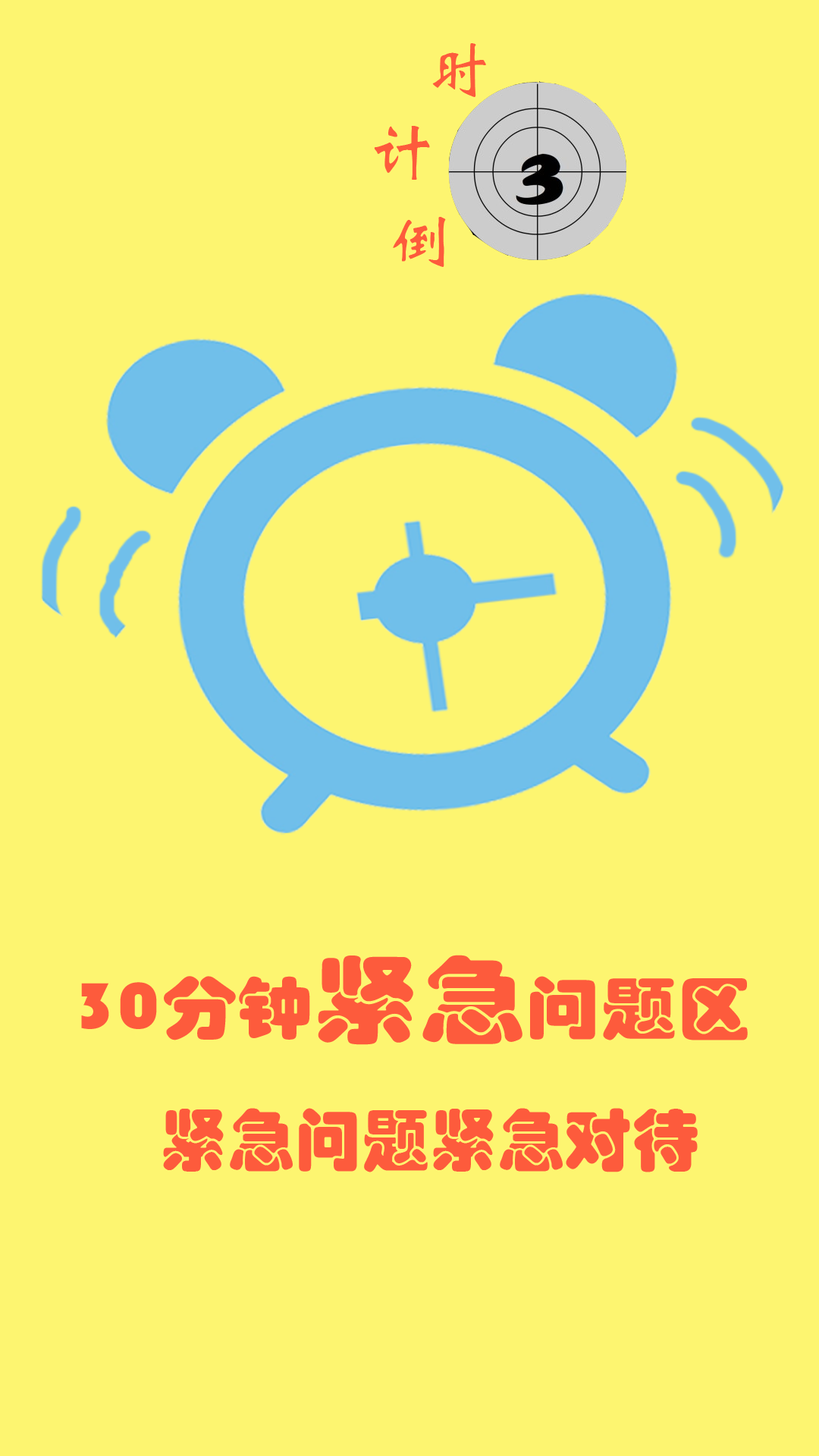
<style>
.page{position:relative;width:819px;height:1456px;background:#fdf570}
.page>*{position:absolute;margin:0}
.t1{font:67.4px "STXinwei";color:#fd5b3c}
.t2{font:67.4px "STHupo";color:#fd5b3c;scale:1.12 1}
.t3{font:94.8px "STHupo";color:#fd5b3c;scale:1.12 1}
.t4{font:67.4px "STHupo";color:#fd5b3c}
</style>
<div class="page">
<p class="t1" style="left:432px;top:43px;width:54px;height:54px">时</p>
<p class="t1" style="left:374px;top:126px;width:56px;height:54px">计</p>
<p class="t1" style="left:393px;top:217px;width:53px;height:50px">倒</p>
<p class="t2" style="left:81px;top:955px;width:667px;height:90px">30分钟<span class="t3">紧急</span>问题区</p>
<p class="t4" style="left:163px;top:1108px;width:535px;height:64px">紧急问题紧急对待</p>
</div>
